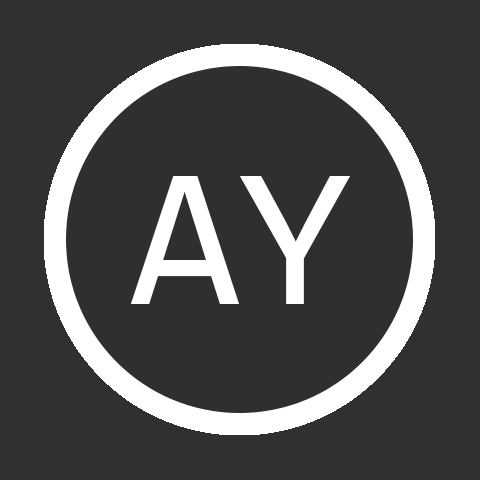
<style>
.page{position:relative;width:480px;height:480px;background:#303030}
.page>*{position:absolute;margin:0}
.t1{font:199.8px "Consolas";color:#ffffff}
</style>
<div class="page">
<p class="t1" style="left:130px;top:176px;width:220px;height:128px">AY</p>
</div>
